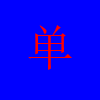
<style>
.page{position:relative;width:100px;height:100px;background:#0000ff}
.page>*{position:absolute;margin:0}
.t1{font:48px "SimSun";color:#ff0000}
</style>
<div class="page">
<p class="t1" style="left:28px;top:25px;width:44px;height:45px">单</p>
</div>
